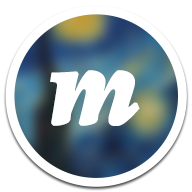
<style>
.page{position:relative;width:192px;height:192px;background:#ffffff}
.page>*{position:absolute;margin:0}
.t1{font:113px "Alegreya-BlackItalic";letter-spacing:-0.076em;color:#ffffff}
</style>
<div class="page">
<p class="t1" style="left:50px;top:70px;width:90px;height:56px">m</p>
</div>
